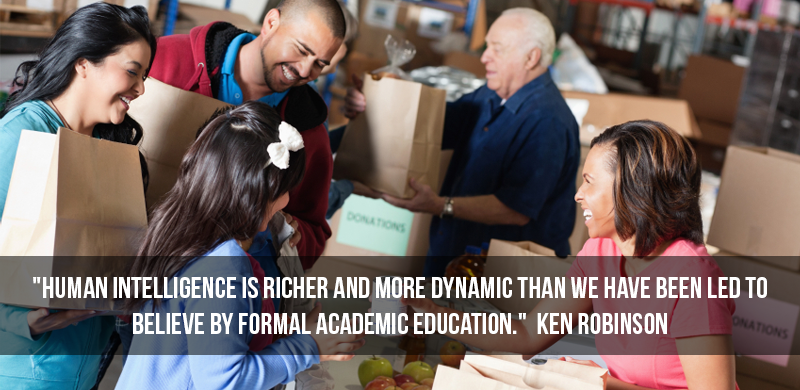
<style>
.page{position:relative;width:800px;height:390px}
.page>*{position:absolute;margin:0}
.t1{font:30px/36px "BebasNeue";color:#ffffff;text-transform:uppercase}
</style>
<div class="page">
<p class="t1" style="left:33px;top:277px;width:734px;height:57px;text-align:center">"Human intelligence is richer and more dynamic than we have been led to believe by formal academic education."  Ken Robinson</p>
</div>
